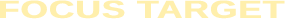
<style>
.page{position:relative;width:285px;height:19px;background:#ffffff}
.page>*{position:absolute;margin:0}
.t1{font:25.2px "Arimo-Bold";color:#ffefac;font-weight:bold;scale:1.4 1}
</style>
<div class="page">
<p class="t1" style="left:0px;top:0px;width:285px;height:19px">FOCUS TARGET</p>
</div>
